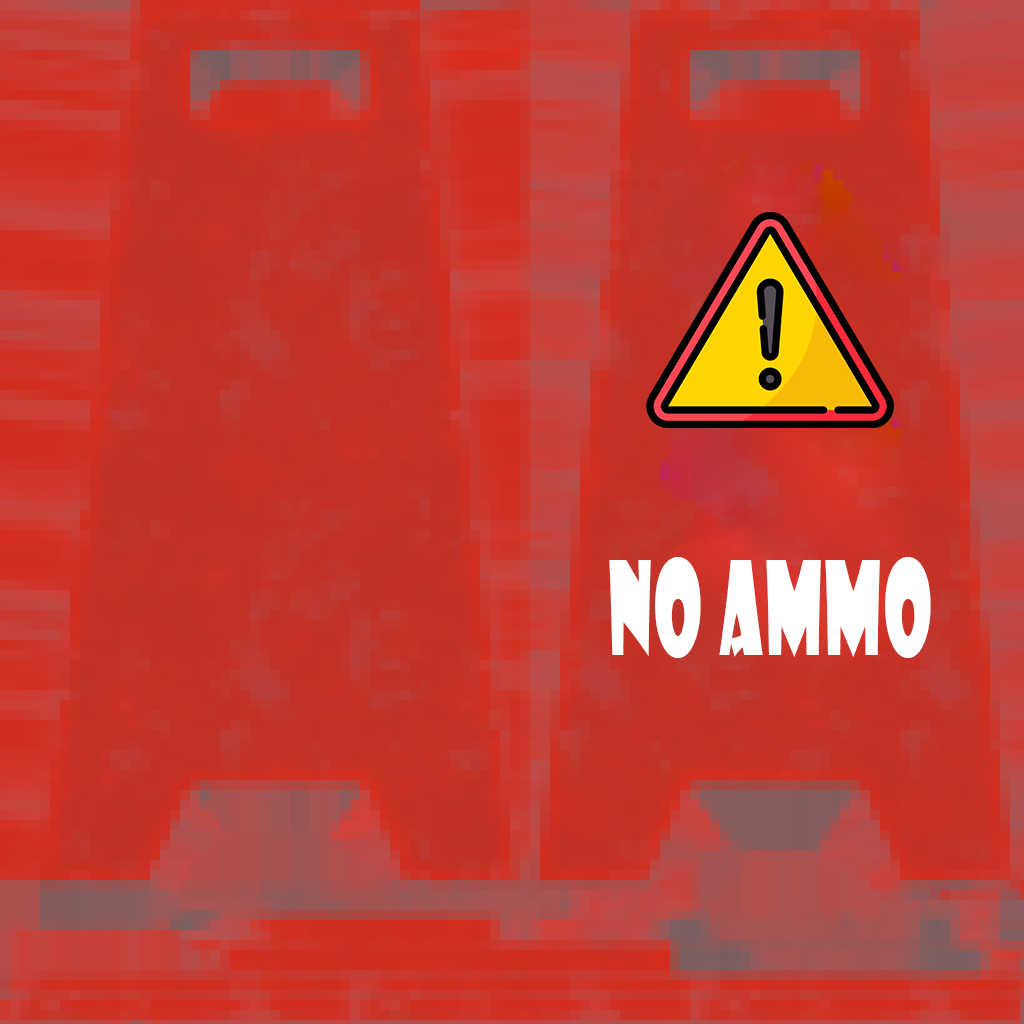
<style>
.page{position:relative;width:1024px;height:1024px}
.page>*{position:absolute;margin:0}
.t1{font:126.2px "ShowcardGothic-Reg";letter-spacing:0.03em;color:#ffffff;text-transform:uppercase;scale:0.55 1}
</style>
<div class="page">
<p class="t1" style="left:609px;top:557px;width:322px;height:101px">NO AMMO</p>
</div>
